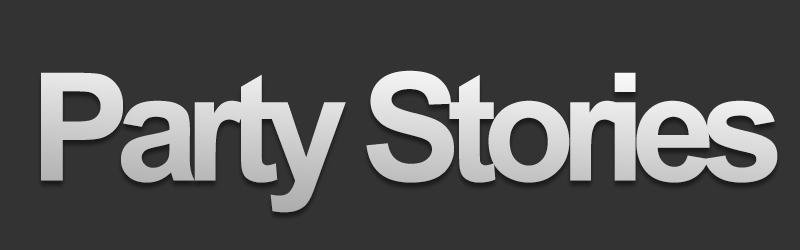
<style>
.page{position:relative;width:800px;height:250px;background:#333333}
.page>*{position:absolute;margin:0}
.t1{font:150px "Arial-BoldMT";letter-spacing:-0.095em;color:#d6d6d6}
</style>
<div class="page">
<p class="t1" style="left:41px;top:70px;width:737px;height:143px">Party Stories</p>
</div>
